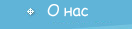
<style>
.page{position:relative;width:132px;height:29px;background:#60b4d8}
.page>*{position:absolute;margin:0}
.t1{font:16px "ComicSansMS";color:#ffffff}
</style>
<div class="page">
<p class="t1" style="left:47px;top:4px;width:41px;height:13px">О нас</p>
</div>
